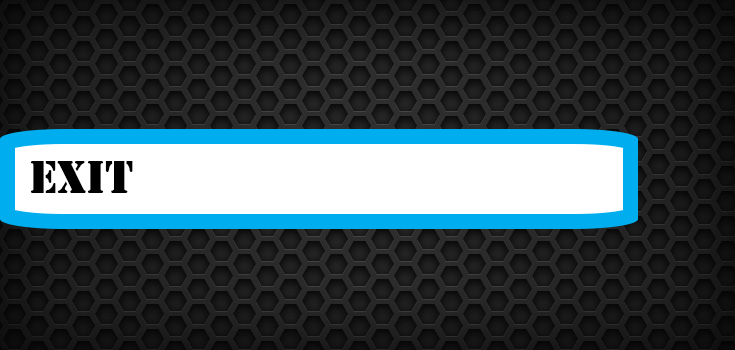
<style>
.page{position:relative;width:735px;height:350px}
.page>*{position:absolute;margin:0}
.t1{font:48px "Stencil";color:#000000}
</style>
<div class="page">
<p class="t1" style="left:30px;top:161px;width:103px;height:32px">EXIT</p>
</div>
